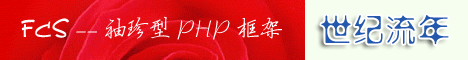
<style>
.page{position:relative;width:468px;height:60px}
.page>*{position:absolute;margin:0}
.t1{font:24px "FZYBXSJW--GB1-0";letter-spacing:0.075em;color:#fdfafc}
.t2{font:24px "FZKATJW--GB1-0";letter-spacing:0.075em;color:#fdfafc}
.t3{font:30px "FZXSHJW--GB1-0";letter-spacing:0.1em;color:#2458ad}
</style>
<div class="page">
<p class="t1" style="left:21px;top:16px;width:261px;height:24px"><span class="t2">FCS</span>   --袖珍型PHP框架</p>
<p class="t3" style="left:321px;top:15px;width:128px;height:30px">世纪流年</p>
</div>
